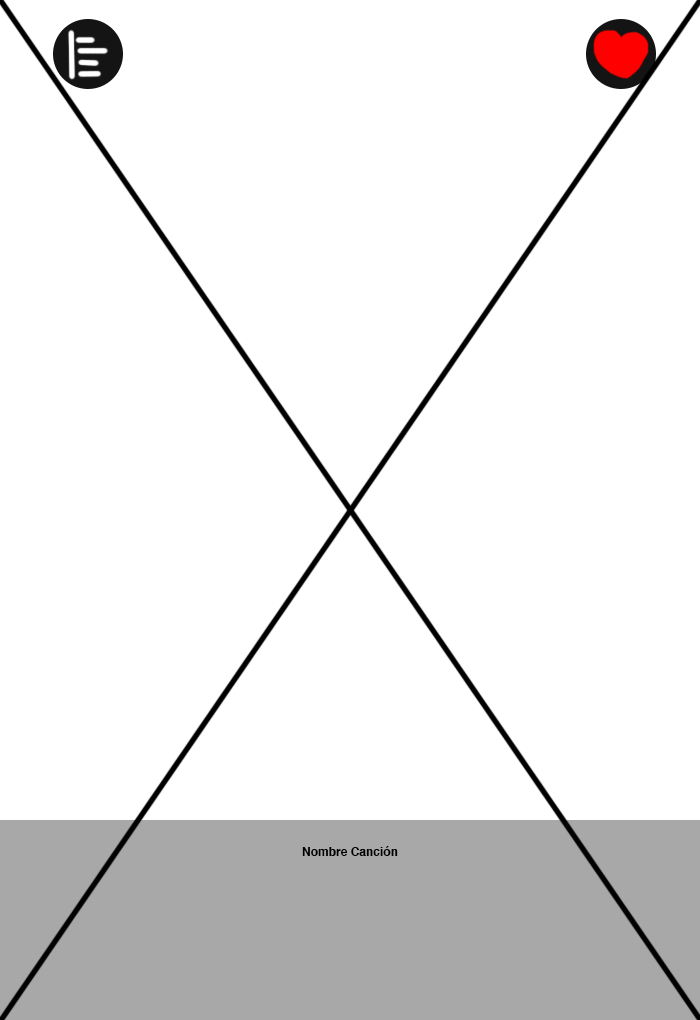
<style>
.page{position:relative;width:700px;height:1020px;background:#ffffff}
.page>*{position:absolute;margin:0}
.t1{font:12px "Helvetica-Bold";color:#000000}
</style>
<div class="page">
<p class="t1" style="left:302px;top:846px;width:96px;height:10px">Nombre Canción</p>
</div>
